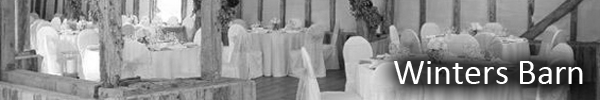
<style>
.page{position:relative;width:600px;height:100px}
.page>*{position:absolute;margin:0}
.t1{font:36px "Calibri";color:#ffffff}
</style>
<div class="page">
<p class="t1" style="left:394px;top:61px;width:189px;height:23px">Winters Barn</p>
</div>
